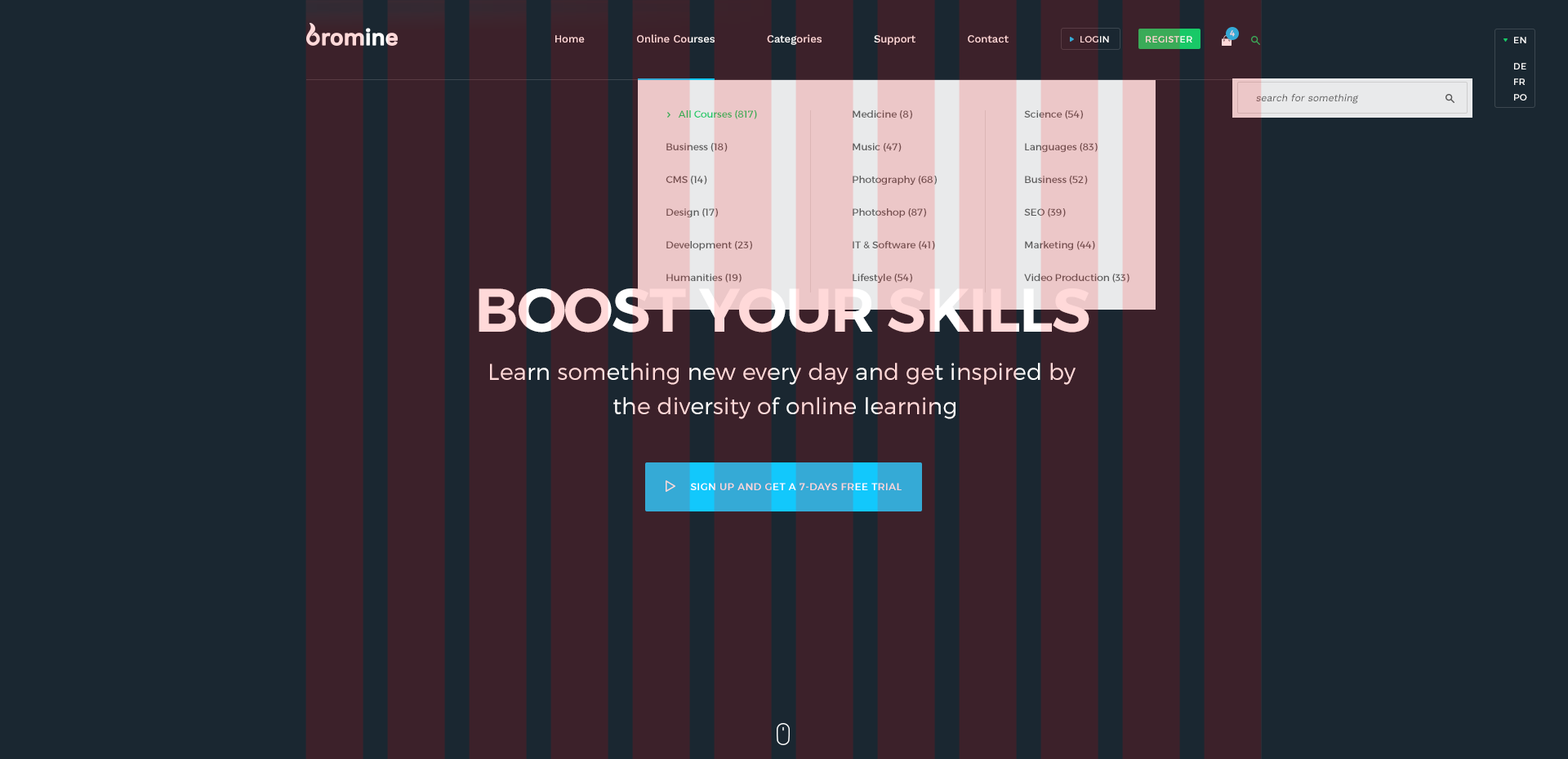
<style>
.page{position:relative;width:1568px;height:759px;background:#1a2731}
.page>*{position:absolute;margin:0}
.t1{font:10.6px "WorkSans-Medium";color:#ffd9d9}
.t2{font:9px "Montserrat-Regular";letter-spacing:0.04em;text-transform:uppercase}
.t3{font:9px "Montserrat-Regular";letter-spacing:0.04em;color:#ffd9d9;text-transform:uppercase}
.t4{font:8.2px "Montserrat-Regular";letter-spacing:0.1em;color:#ffd9d9}
.t5{font:9px/26.1px "Montserrat-Regular";letter-spacing:0.04em;color:#ffffff;text-transform:uppercase}
.t6{font:9px/15.5px "Montserrat-Regular";letter-spacing:0.04em;color:#ffffff;text-transform:uppercase}
.t7{font:9.8px "WorkSans-Regular";color:#535353;font-style:italic}
.t8{font:9.8px/32.7px "Montserrat-Regular";color:#5c5c5c}
.t9{font:9.8px/32.7px "Montserrat-Regular";color:#18c967}
.t10{font:61.2px "Montserrat-SemiBold";letter-spacing:-0.02em;color:#ffd9d9}
.t11{font:22.9px/34.3px "Montserrat-Light";letter-spacing:0.01em}
.t12{font:9.8px "Montserrat-Regular";letter-spacing:0.05em;text-transform:uppercase}
</style>
<div class="page">
<p class="t1" style="left:555px;top:34px;width:454px;height:11px">Home               Online Courses               Categories               Support               Contact</p>
<p class="t2" style="left:1080px;top:36px;width:29px;height:6px">LOGIN</p>
<p class="t3" style="left:1146px;top:36px;width:46px;height:6px">Register</p>
<p class="t4" style="left:1230px;top:30px;width:5px;height:7px">4</p>
<p class="t5" style="left:1514px;top:37px;width:13px;height:63px">EN<br>de<br><span class="t6">fr<br>po</span></p>
<p class="t7" style="left:1256px;top:94px;width:103px;height:10px">search for something</p>
<p class="t8" style="left:666px;top:110px;width:91px;height:173px"><span class="t9">     All Courses (817)<br></span>Business (18)<br>CMS (14)<br>Design (17)<br>Development (23)<br>Humanities (19)</p>
<p class="t8" style="left:853px;top:110px;width:84px;height:173px">Medicine (8)<br>Music (47)<br>Photography (68)<br>Photoshop (87)<br>IT &amp; Software (41)<br>Lifestyle (54)</p>
<p class="t8" style="left:1024px;top:110px;width:105px;height:173px">Science (54)<br>Languages (83)<br>Business (52)<br>SEO (39)<br>Marketing (44)<br>Video Production (33)</p>
<p class="t10" style="left:479px;top:288px;width:610px;height:44px">BOOST YOUR SKILLS</p>
<p class="t11" style="left:490px;top:363px;width:586px;height:56px;text-align:center">Learn something new every day and get inspired by <br>the diversity of online learning</p>
<p class="t12" style="left:690px;top:483px;width:212px;height:7px">SIGN UP AND GET A 7-DAYS FREE TRIAL</p>
</div>
